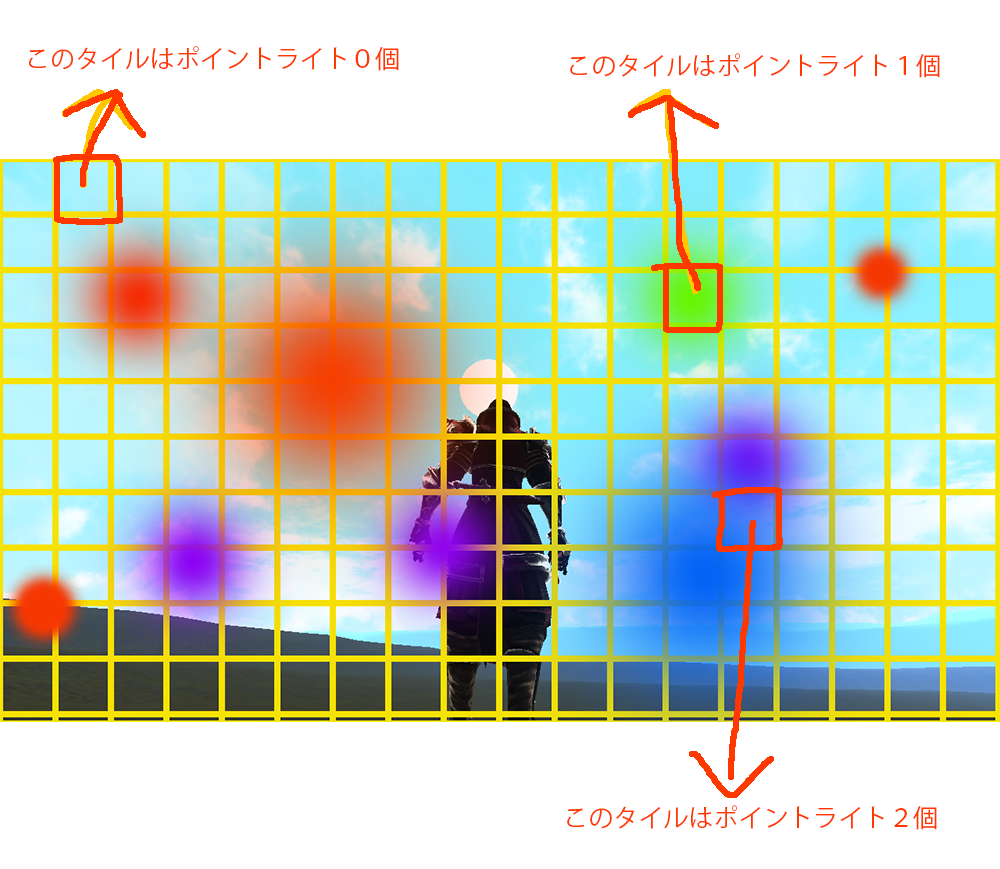
<style>
.page{position:relative;width:1000px;height:869px;background:#ffffff}
.page>*{position:absolute;margin:0}
.t1{font:25px "KozGoPr6N-Regular";color:#ff3800}
</style>
<div class="page">
<p class="t1" style="left:29px;top:46px;width:370px;height:25px">このタイルはポイントライト０個</p>
<p class="t1" style="left:570px;top:53px;width:370px;height:25px">このタイルはポイントライト１個</p>
<p class="t1" style="left:567px;top:805px;width:370px;height:25px">このタイルはポイントライト２個</p>
</div>
